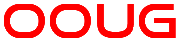
<style>
.page{position:relative;width:180px;height:44px;background:#ffffff}
.page>*{position:absolute;margin:0}
.t1{font:46px "GoodTimesRg-Regular";letter-spacing:0.04em;color:#ff0000}
</style>
<div class="page">
<p class="t1" style="left:4px;top:4px;width:172px;height:34px">OOUG</p>
<p class="t1" style="left:4px;top:4px;width:172px;height:34px">OOUG</p>
<p class="t1" style="left:4px;top:4px;width:172px;height:34px">OOUG</p>
</div>
